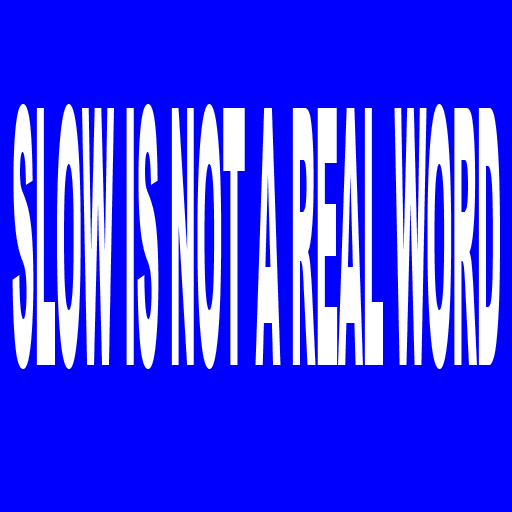
<style>
.page{position:relative;width:512px;height:512px;background:#0000ff}
.page>*{position:absolute;margin:0}
.t1{font:358.9px "Arial-Black";color:#ffffff;scale:0.09 1}
</style>
<div class="page">
<p class="t1" style="left:12px;top:104px;width:488px;height:265px">SLOW IS NOT A REAL WORD</p>
</div>
